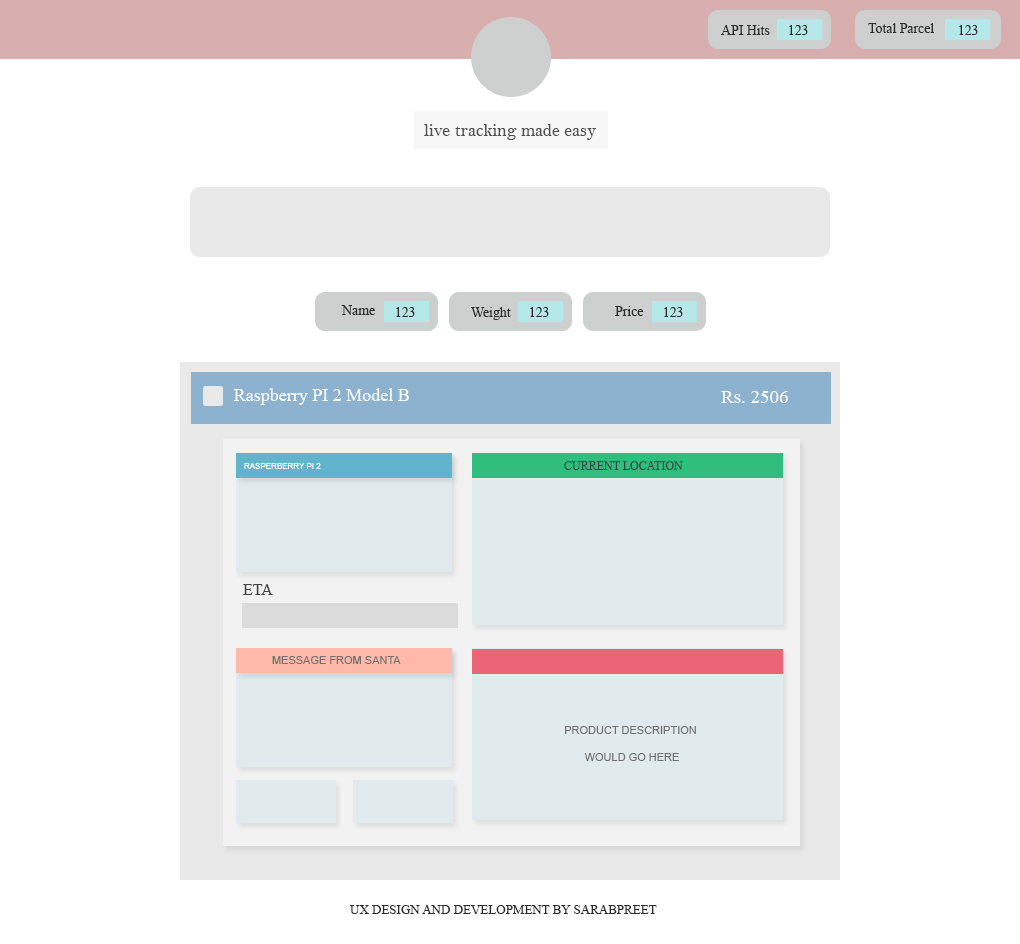
<style>
.page{position:relative;width:1020px;height:944px;background:#ffffff}
.page>*{position:absolute;margin:0}
.t1{font:13.8px "TimesNewRomanPSMT";color:#2c2b2b}
.t2{font:18px "BellMT";color:#4e4e4e}
.t3{font:18px "TimesNewRomanPSMT";color:#ffffff}
.t4{font:19px "TimesNewRomanPSMT";color:#ffffff}
.t5{font:12px "TimesNewRomanPSMT";color:#434343;text-transform:uppercase}
.t6{font:8px "ArialMT";color:#fffdfd;text-transform:uppercase}
.t7{font:16px "TimesNewRomanPSMT";color:#434343}
.t8{font:11px "ArialMT";color:#6f6f6f;text-transform:uppercase}
.t9{font:11px/27px "ArialMT";color:#6f6f6f;text-transform:uppercase}
.t10{font:13px "TimesNewRomanPSMT";color:#2c2b2b;text-transform:uppercase}
</style>
<div class="page">
<p class="t1" style="left:721px;top:25px;width:49px;height:10px">API Hits</p>
<p class="t1" style="left:789px;top:25px;width:19px;height:10px">123</p>
<p class="t1" style="left:868px;top:23px;width:66px;height:10px">Total Parcel</p>
<p class="t1" style="left:959px;top:25px;width:19px;height:10px">123</p>
<p class="t2" style="left:424px;top:124px;width:172px;height:16px">live tracking made easy</p>
<p class="t1" style="left:341px;top:305px;width:34px;height:10px">Name</p>
<p class="t1" style="left:396px;top:307px;width:19px;height:10px">123</p>
<p class="t1" style="left:471px;top:307px;width:40px;height:13px">Weight</p>
<p class="t1" style="left:530px;top:307px;width:19px;height:10px">123</p>
<p class="t1" style="left:615px;top:306px;width:29px;height:10px">Price</p>
<p class="t1" style="left:664px;top:307px;width:19px;height:10px">123</p>
<p class="t3" style="left:234px;top:388px;width:175px;height:17px">Raspberry PI 2 Model B</p>
<p class="t4" style="left:721px;top:391px;width:67px;height:12px">Rs. 2506</p>
<p class="t5" style="left:564px;top:461px;width:119px;height:9px">current location</p>
<p class="t6" style="left:244px;top:463px;width:77px;height:6px">rasperberry pi 2</p>
<p class="t7" style="left:243px;top:584px;width:30px;height:11px">ETA</p>
<p class="t8" style="left:272px;top:656px;width:129px;height:8px">message from santa</p>
<p class="t9" style="left:565px;top:726px;width:131px;height:35px;text-align:center">product description <br>would go here</p>
<p class="t10" style="left:350px;top:905px;width:307px;height:9px">ux design and development by sarabpreet</p>
</div>
